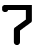
<style>
.page{position:relative;width:35px;height:50px;background:#ffffff}
.page>*{position:absolute;margin:0}
.t1{font:61.9px "OCRAExtended";color:#000000;scale:1.16 1}
</style>
<div class="page">
<p class="t1" style="left:2px;top:5px;width:30px;height:40px">7</p>
</div>
